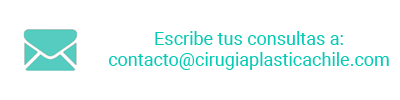
<style>
.page{position:relative;width:400px;height:100px;background:#ffffff}
.page>*{position:absolute;margin:0}
.t1{font:18px "Roboto-Regular";color:#04cab6}
</style>
<div class="page">
<p class="t1" style="left:109px;top:31px;width:280px;height:39px;text-align:center">Escribe tus consultas a:<br>contacto@cirugiaplasticachile.com</p>
</div>
